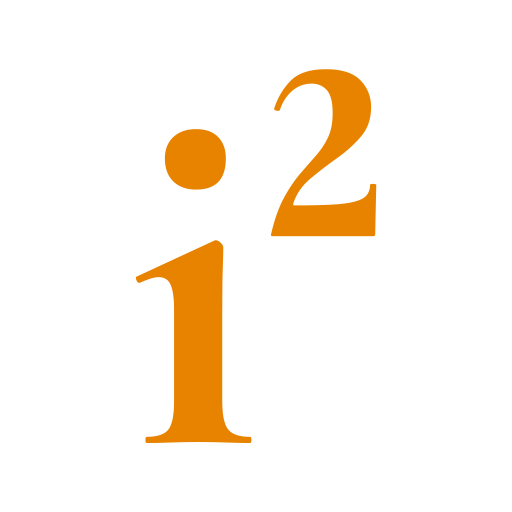
<style>
.page{position:relative;width:512px;height:512px;background:#ffffff}
.page>*{position:absolute;margin:0}
.t1{font:512px "CormorantGaramond-Bold";color:#e88300}
</style>
<div class="page">
<p class="t1" style="left:135px;top:69px;width:242px;height:374px">i²</p>
</div>
